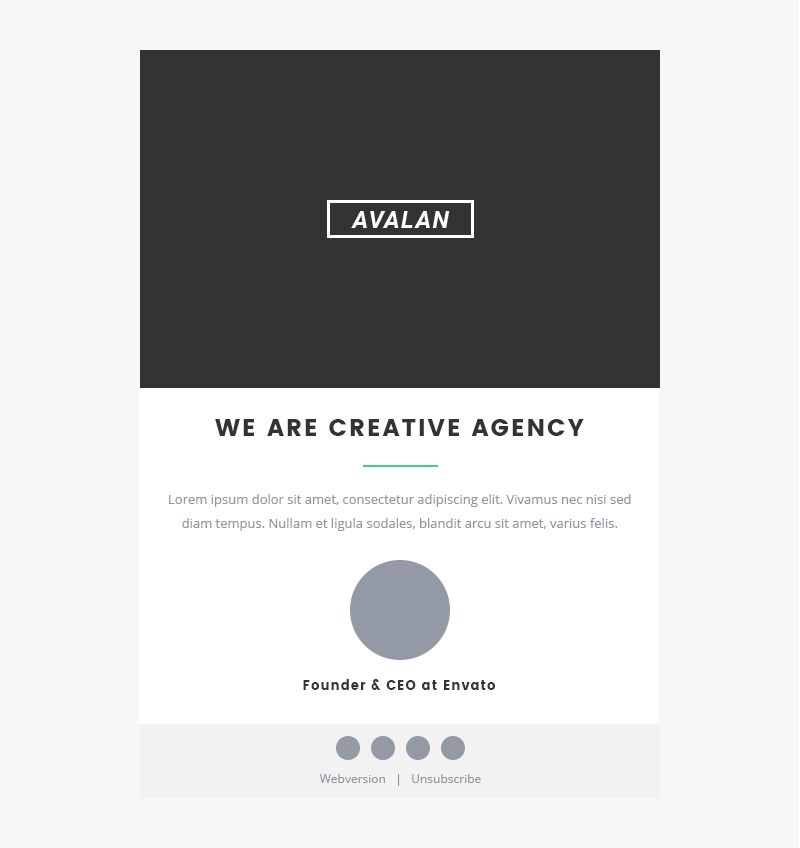
<style>
.page{position:relative;width:800px;height:848px;background:#f7f7f7}
.page>*{position:absolute;margin:0}
.t1{font:24px "Poppins";letter-spacing:0.08em;color:#333333}
.t2{font:13px/24px "OpenSans";color:#8f96a1}
.t3{font:13px "Poppins";letter-spacing:0.075em;color:#333333}
.t4{font:12px "OpenSans";color:#8f96a1}
</style>
<div class="page">
<p class="t1" style="left:215px;top:419px;width:369px;height:17px">WE ARE CREATIVE AGENCY</p>
<p class="t2" style="left:169px;top:494px;width:462px;height:37px;text-align:center">Lorem ipsum dolor sit amet, consectetur adipiscing elit. Vivamus nec nisi sed diam tempus. Nullam et ligula sodales, blandit arcu sit amet, varius felis.</p>
<p class="t3" style="left:303px;top:679px;width:192px;height:11px">Founder &amp; CEO at Envato</p>
<p class="t4" style="left:319px;top:774px;width:162px;height:12px">Webversion   |   Unsubscribe</p>
</div>
